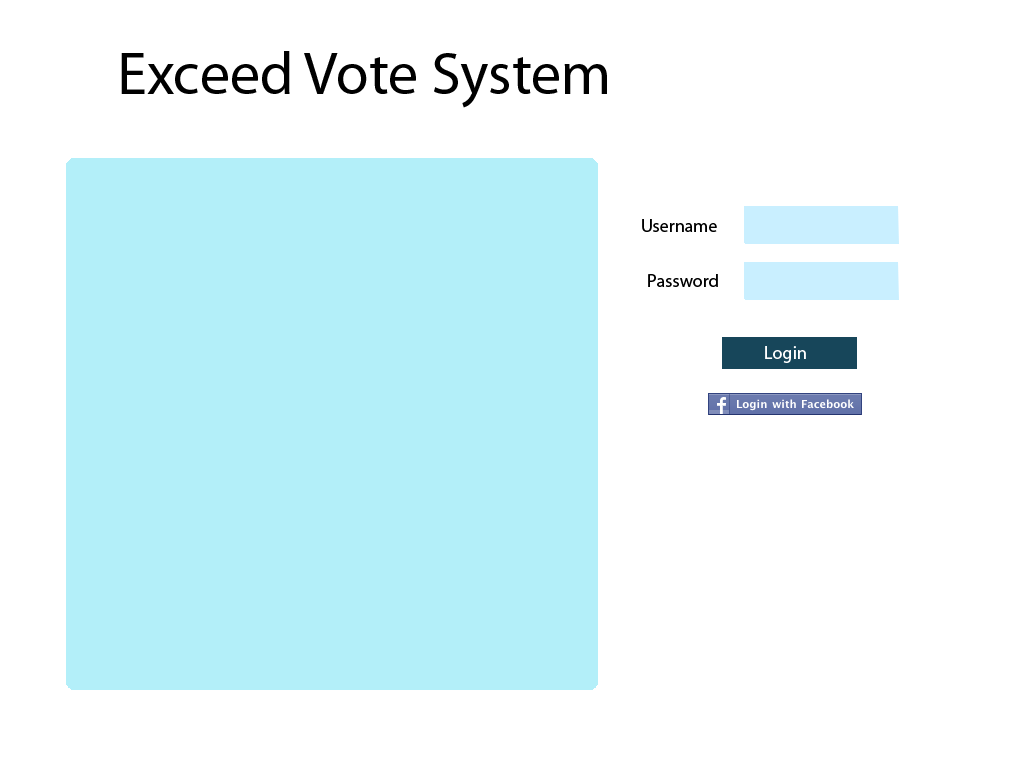
<style>
.page{position:relative;width:1024px;height:768px;background:#ffffff}
.page>*{position:absolute;margin:0}
.t1{font:60px "MyriadPro-Regular";color:#000000}
.t2{font:18px "MyriadPro-Regular";color:#000000}
.t3{font:18px "MyriadPro-Regular";color:#ffffff}
</style>
<div class="page">
<p class="t1" style="left:121px;top:51px;width:486px;height:57px">Exceed Vote System</p>
<p class="t2" style="left:642px;top:219px;width:75px;height:13px">Username</p>
<p class="t2" style="left:648px;top:274px;width:70px;height:13px">Password</p>
<p class="t3" style="left:765px;top:346px;width:41px;height:17px">Login</p>
</div>
